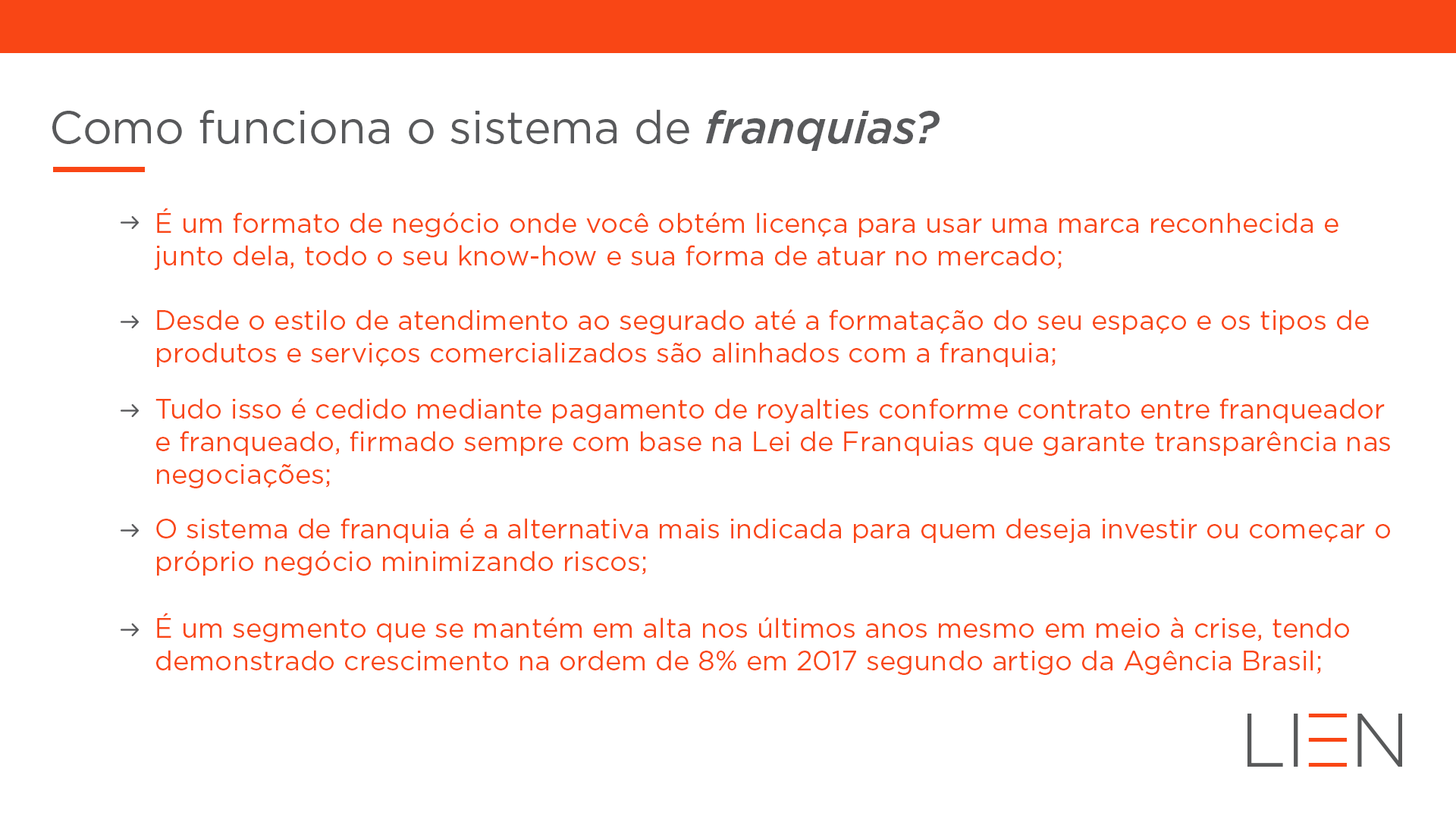
<style>
.page{position:relative;width:1456px;height:819px;background:#ffffff}
.page>*{position:absolute;margin:0}
.t1{font:45.5px "Gotham-Book";color:#58595b}
.t2{font:45.5px "Gotham-MediumItalic";color:#58595b}
.t3{font:27.3px "Gotham-Book";color:#f94615}
</style>
<div class="page">
<p class="t1" style="left:52px;top:109px;width:888px;height:42px">Como funciona o sistema de <span class="t2">franquias?</span></p>
<p class="t3" style="left:154px;top:208px;width:1184px;height:62px">É um formato de negócio onde você obtém licença para usar uma marca reconhecida e junto dela, todo o seu know-how e sua forma de atuar no mercado;</p>
<p class="t3" style="left:157px;top:309px;width:1212px;height:58px">Desde o estilo de atendimento ao segurado até a formatação do seu espaço e os tipos de produtos e serviços comercializados são alinhados com a franquia;</p>
<p class="t3" style="left:155px;top:397px;width:1235px;height:91px">Tudo isso é cedido mediante pagamento de royalties conforme contrato entre franqueador e franqueado, firmado sempre com base na Lei de Franquias que garante transparência nas negociações;</p>
<p class="t3" style="left:156px;top:517px;width:1234px;height:59px">O sistema de franquia é a alternativa mais indicada para quem deseja investir ou começar o próprio negócio minimizando riscos;</p>
<p class="t3" style="left:156px;top:613px;width:1193px;height:62px">É um segmento que se mantém em alta nos últimos anos mesmo em meio à crise, tendo demonstrado crescimento na ordem de 8% em 2017 segundo artigo da Agência Brasil;</p>
</div>
